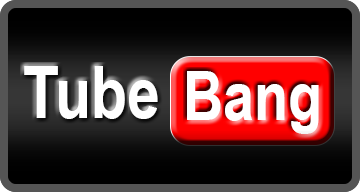
<style>
.page{position:relative;width:360px;height:192px}
.page>*{position:absolute;margin:0}
.t1{font:72px "ArialNarrow-Bold";color:#ffffff}
.t2{font:68px "ArialNarrow-Bold";color:#ffffff}
</style>
<div class="page">
<p class="t1" style="left:24px;top:66px;width:134px;height:53px">Tube</p>
<p class="t2" style="left:187px;top:71px;width:132px;height:63px">Bang</p>
</div>
